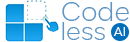
<style>
.page{position:relative;width:130px;height:42px;background:#ffffff}
.page>*{position:absolute;margin:0}
.t1{font:26.4px "LamaSans-Light";color:#5f95c5}
.t2{font:25.1px "LamaSans-Light";color:#5f95c5}
.t3{font:13px "LamaSans-Regular";color:#ffffff}
</style>
<div class="page">
<p class="t1" style="left:62px;top:2px;width:67px;height:19px">Code</p>
<p class="t2" style="left:62px;top:22px;width:43px;height:18px">less</p>
<p class="t3" style="left:113px;top:27px;width:12px;height:9px">AI</p>
</div>
